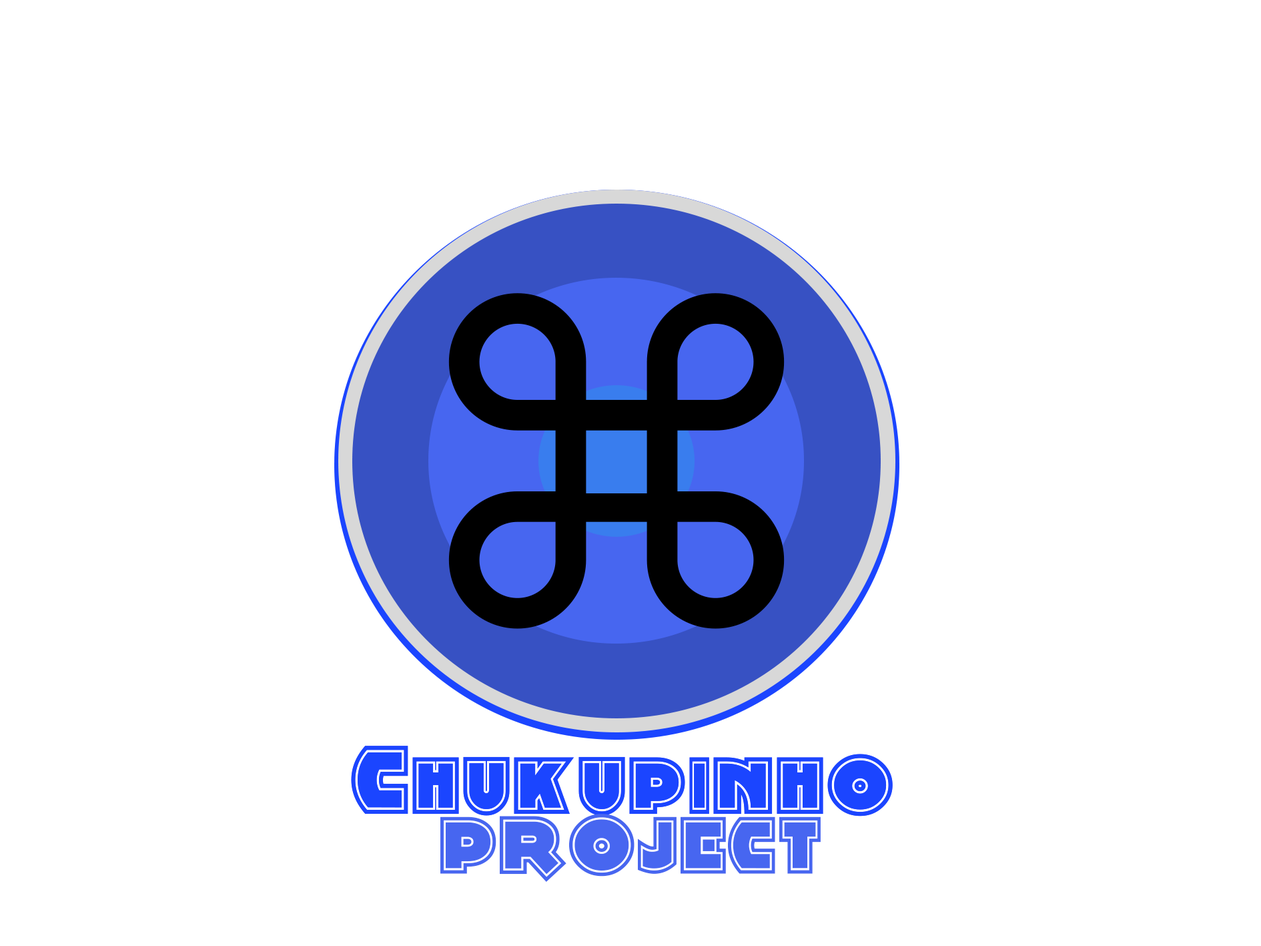
<style>
.page{position:relative;width:1261px;height:946px;background:#ffffff}
.page>*{position:absolute;margin:0}
.t1{font:100.1px "MinstrelPosterTwoNF";color:#1b45ff}
.t2{font:83.4px "MinstrelPosterTwoNF";color:#4766f0}
</style>
<div class="page">
<p class="t1" style="left:351px;top:745px;width:542px;height:71px">Chukupinho</p>
<p class="t1" style="left:351px;top:745px;width:542px;height:71px">Chukupinho</p>
<p class="t2" style="left:440px;top:813px;width:381px;height:68px">PROJECT</p>
</div>
